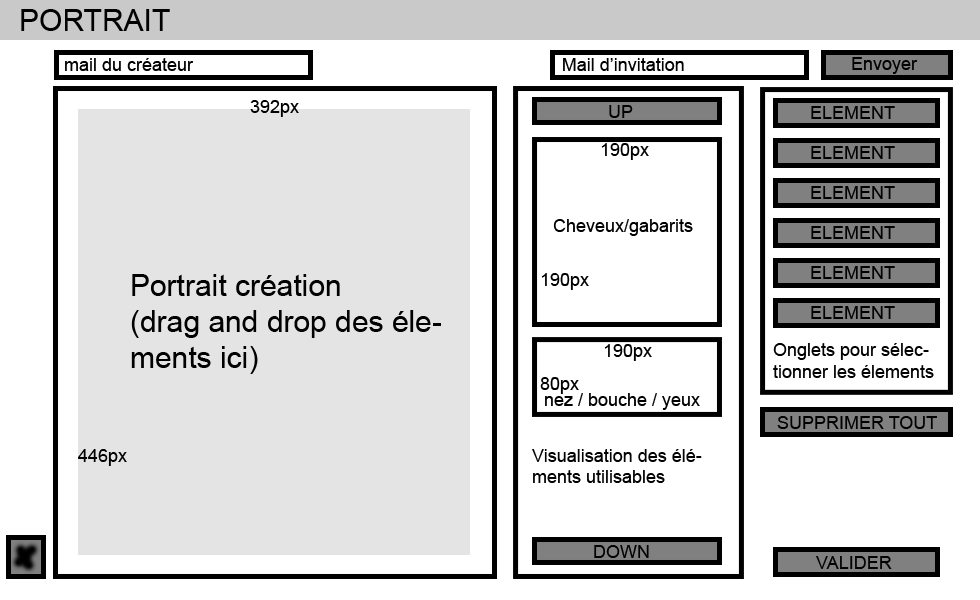
<style>
.page{position:relative;width:980px;height:600px;background:#ffffff}
.page>*{position:absolute;margin:0}
.t1{font:30px "ArialMT";color:#010101}
.t2{font:18px "ArialMT";color:#010101}
</style>
<div class="page">
<p class="t1" style="left:21px;top:9px;width:149px;height:22px">PORTRAIT</p>
<p class="t2" style="left:65px;top:58px;width:129px;height:13px">mail du créateur</p>
<p class="t2" style="left:250px;top:100px;width:49px;height:17px">392px</p>
<p class="t2" style="left:609px;top:105px;width:24px;height:13px">UP</p>
<p class="t2" style="left:811px;top:106px;width:84px;height:13px">ELEMENT</p>
<p class="t2" style="left:601px;top:143px;width:48px;height:17px">190px</p>
<p class="t2" style="left:811px;top:146px;width:84px;height:13px">ELEMENT</p>
<p class="t2" style="left:811px;top:186px;width:84px;height:13px">ELEMENT</p>
<p class="t2" style="left:553px;top:219px;width:140px;height:17px">Cheveux/gabarits</p>
<p class="t2" style="left:811px;top:226px;width:84px;height:13px">ELEMENT</p>
<p class="t2" style="left:811px;top:266px;width:84px;height:13px">ELEMENT</p>
<p class="t1" style="left:131px;top:274px;width:310px;height:100px">Portrait création<br>(drag and drop des élements ici)</p>
<p class="t2" style="left:541px;top:273px;width:48px;height:17px">190px</p>
<p class="t2" style="left:811px;top:306px;width:84px;height:13px">ELEMENT</p>
<p class="t2" style="left:604px;top:344px;width:48px;height:17px">190px</p>
<p class="t2" style="left:773px;top:343px;width:161px;height:35px">Onglets pour sélectionner les élements</p>
<p class="t2" style="left:540px;top:377px;width:39px;height:17px">80px</p>
<p class="t2" style="left:545px;top:393px;width:155px;height:17px">nez / bouche / yeux</p>
<p class="t2" style="left:777px;top:416px;width:160px;height:13px">SUPPRIMER TOUT</p>
<p class="t2" style="left:78px;top:449px;width:49px;height:17px">446px</p>
<p class="t2" style="left:532px;top:449px;width:170px;height:34px">Visualisation des éléments utilisables</p>
<p class="t2" style="left:594px;top:545px;width:55px;height:13px">DOWN</p>
<p class="t2" style="left:816px;top:556px;width:76px;height:13px">VALIDER</p>
</div>
